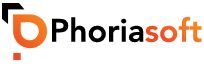
<style>
.page{position:relative;width:204px;height:64px;background:#ffffff}
.page>*{position:absolute;margin:0}
.t1{font:32.1px "AvenirLT-Heavy";color:#000000}
.t2{font:32.1px "AvenirLT-Heavy";color:#f26122}
</style>
<div class="page">
<p class="t1" style="left:52px;top:17px;width:92px;height:26px">Phoria</p>
<p class="t2" style="left:145px;top:17px;width:57px;height:26px">soft</p>
</div>
